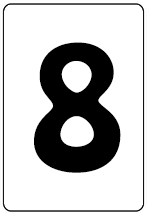
<style>
.page{position:relative;width:147px;height:213px;background:#ffffff}
.page>*{position:absolute;margin:0}
.t1{font:154.6px "HoboStd";color:#000000;scale:1.05 1}
</style>
<div class="page">
<p class="t1" style="left:34px;top:42px;width:87px;height:131px">8</p>
</div>
